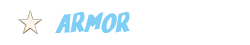
<style>
.page{position:relative;width:250px;height:45px;background:#ffffff}
.page>*{position:absolute;margin:0}
.t1{font:30px "HoustonComicsPersonalUse";color:#7ecef6}
</style>
<div class="page">
<p class="t1" style="left:55px;top:12px;width:75px;height:22px">ARMOR</p>
</div>
